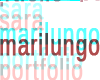
<style>
.page{position:relative;width:100px;height:80px;background:#ffffff}
.page>*{position:absolute;margin:0}
.t1{font:30px/25px "LiberationSansNarrow";letter-spacing:0.025em;font-weight:bold;scale:0.83 1}
</style>
<div class="page">
<p class="t1" style="left:0px;top:3px;width:100px;height:73px">sara<br>marilungo<br>portfolio</p>
</div>
